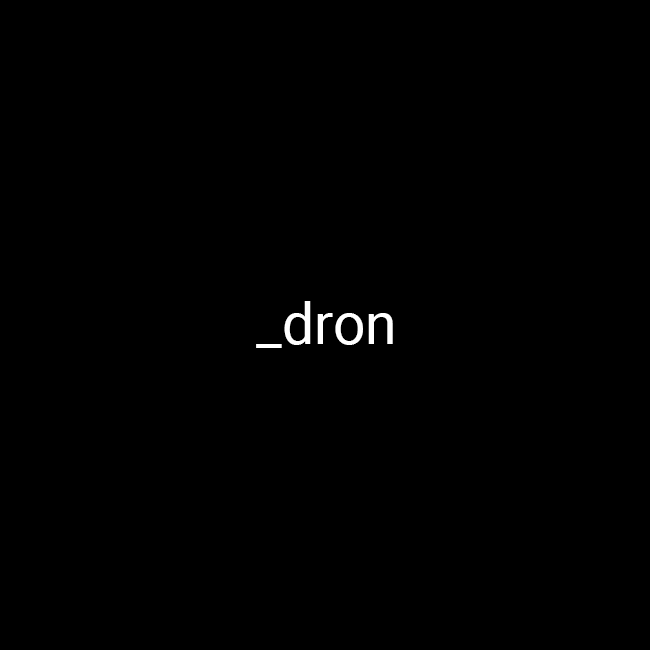
<style>
.page{position:relative;width:650px;height:650px;background:#000000}
.page>*{position:absolute;margin:0}
.t1{font:57.3px "Roboto-Regular";color:#ffffff}
</style>
<div class="page">
<p class="t1" style="left:256px;top:301px;width:137px;height:47px">_dron</p>
</div>
